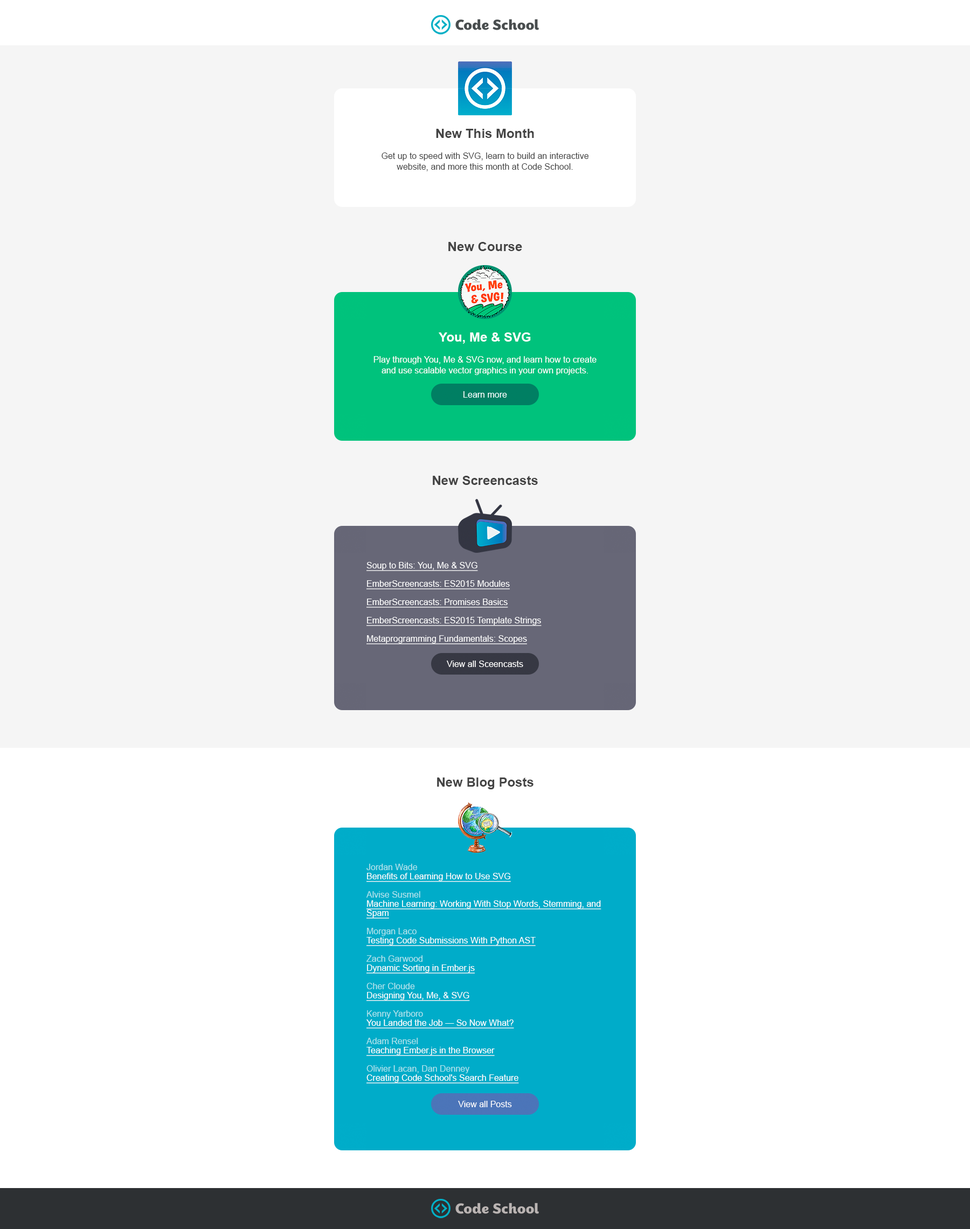
<style>
.page{position:relative;width:970px;height:1229px;background:#f5f5f5}
.page>*{position:absolute;margin:0}
.t1{font:12.9px "Arial-BoldMT";color:#444444}
.t2{font:8.6px "ArialMT";color:#444444}
.t3{font:12.9px "Arial-BoldMT";color:#ffffff}
.t4{font:8.6px "ArialMT";color:#ffffff}
.t5{font:8.6px/9.2px "ArialMT";color:#ffffff;text-decoration:underline}
.t6{font:8.6px/9.2px "ArialMT";color:#afe4ed}
</style>
<div class="page">
<p class="t1" style="left:436px;top:129px;width:98px;height:9px">New This Month</p>
<p class="t2" style="left:382px;top:153px;width:207px;height:18px;text-align:center">Get up to speed with SVG, learn to build an interactive<br>website, and more this month at Code School.</p>
<p class="t1" style="left:448px;top:242px;width:74px;height:9px">New Course</p>
<p class="t3" style="left:439px;top:333px;width:92px;height:11px">You, Me &amp; SVG</p>
<p class="t4" style="left:373px;top:356px;width:224px;height:19px;text-align:center">Play through You, Me &amp; SVG now, and learn how to create and use scalable vector graphics in your own projects.</p>
<p class="t1" style="left:433px;top:476px;width:105px;height:9px">New Screencasts</p>
<p class="t5" style="left:366px;top:562px;width:176px;height:83px">Soup to Bits: You, Me &amp; SVG<br><br>EmberScreencasts: ES2015 Modules<br><br>EmberScreencasts: Promises Basics<br><br>EmberScreencasts: ES2015 Template Strings<br><br>Metaprogramming Fundamentals: Scopes</p>
<p class="t1" style="left:437px;top:778px;width:97px;height:12px">New Blog Posts</p>
<p class="t5" style="left:366px;top:864px;width:235px;height:220px"><span class="t6">Jordan Wade <br></span>Benefits of Learning How to Use SVG<br><br><span class="t6">Alvise Susmel <br></span>Machine Learning: Working With Stop Words, Stemming, and Spam<br><br><span class="t6">Morgan Laco <br></span>Testing Code Submissions With Python AST<br><br><span class="t6">Zach Garwood <br></span>Dynamic Sorting in Ember.js<br><br><span class="t6">Cher Cloude <br></span>Designing You, Me, &amp; SVG<br><br><span class="t6">Kenny Yarboro <br></span>You Landed the Job — So Now What?<br><br><span class="t6">Adam Rensel <br></span>Teaching Ember.js in the Browser<br><br><span class="t6">Olivier Lacan, Dan Denney <br></span>Creating Code School's Search Feature</p>
</div>
